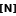
<style>
.page{position:relative;width:16px;height:16px;background:#ffffff}
.page>*{position:absolute;margin:0}
.t1{font:9.6px "HelveticaNeue-Bold";color:#000000}
.t2{font:11.2px "HelveticaNeue-Bold";color:#000000}
</style>
<div class="page">
<p class="t1" style="left:0px;top:4px;width:16px;height:9px">[    ]</p>
<p class="t2" style="left:4px;top:4px;width:8px;height:8px">N</p>
</div>
